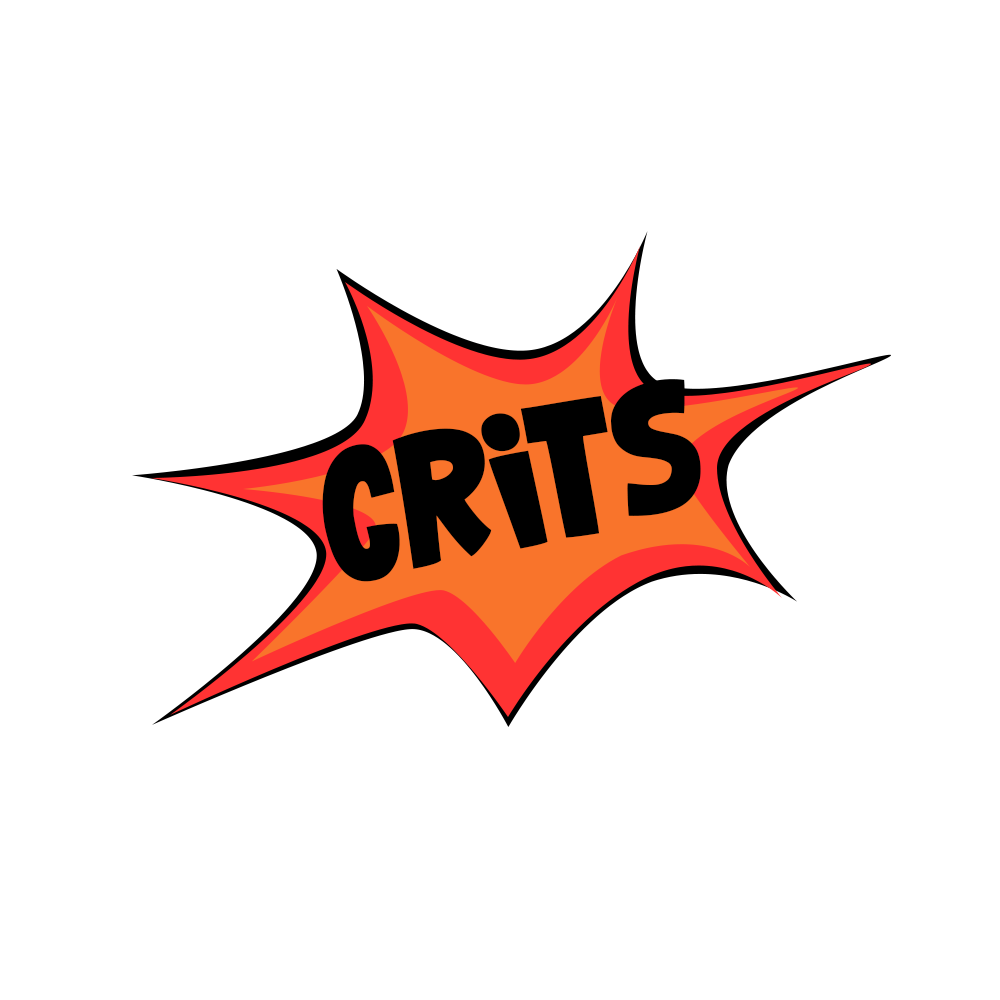
<style>
.page{position:relative;width:1000px;height:1000px;background:#ffffff}
.page>*{position:absolute;margin:0}
.t1{font:220px "VTC-GarageSale";color:#000000}
</style>
<div class="page">
<p class="t1" style="left:322px;top:379px;width:379px;height:203px;rotate:-12deg">Crits</p>
</div>
